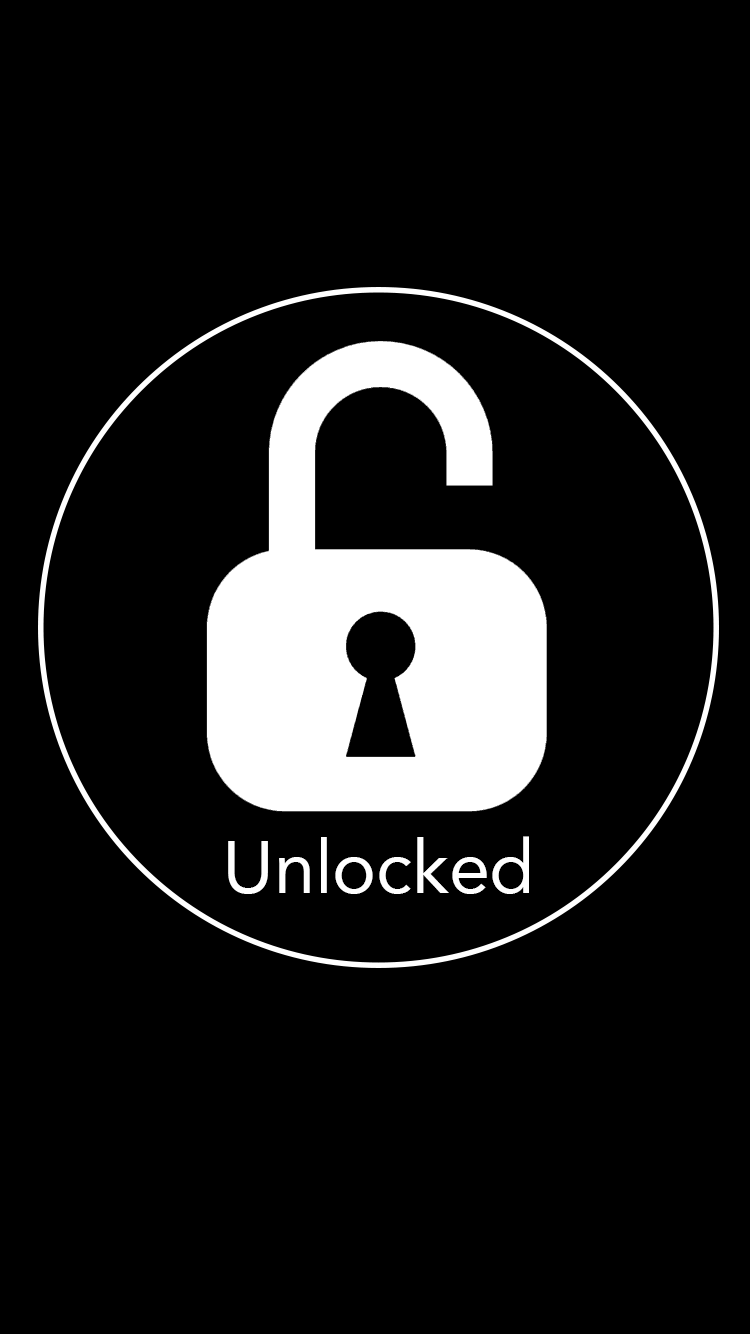
<style>
.page{position:relative;width:750px;height:1334px;background:#000000}
.page>*{position:absolute;margin:0}
.t1{font:73.7px "Avenir-Roman";color:#ffffff}
</style>
<div class="page">
<p class="t1" style="left:228px;top:836px;width:301px;height:58px">Unlocked</p>
</div>
